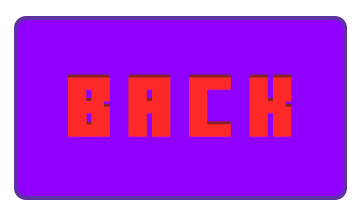
<style>
.page{position:relative;width:360px;height:216px;background:#9000ff}
.page>*{position:absolute;margin:0}
.t1{font:60px "MinercraftoryRegular";letter-spacing:0.2em;color:#fd2828;font-weight:bold}
</style>
<div class="page">
<p class="t1" style="left:68px;top:74px;width:224px;height:60px">BACK</p>
<p class="t1" style="left:68px;top:77px;width:224px;height:60px">BACK</p>
</div>
